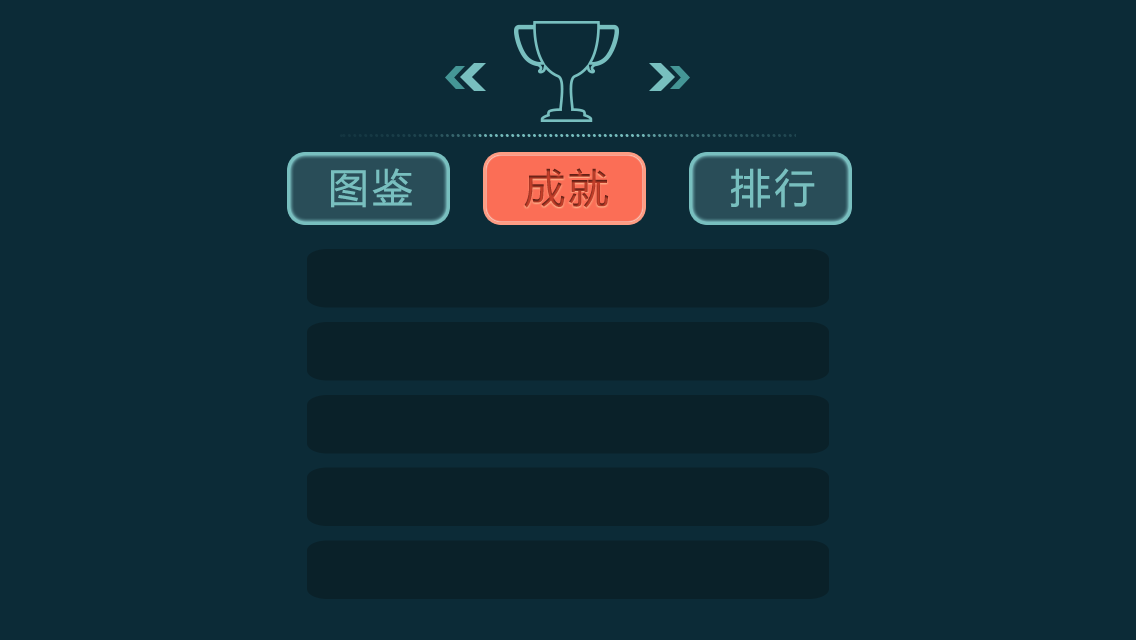
<style>
.page{position:relative;width:1136px;height:640px;background:#0c2b37}
.page>*{position:absolute;margin:0}
.t1{font:40px "MicrosoftYaHei";letter-spacing:0.1em;color:#78bfbf}
.t2{font:40px "MicrosoftYaHei";letter-spacing:0.1em}
</style>
<div class="page">
<p class="t1" style="left:331px;top:168px;width:81px;height:40px">图鉴</p>
<p class="t2" style="left:524px;top:168px;width:85px;height:40px">成就</p>
<p class="t1" style="left:730px;top:168px;width:85px;height:40px">排行</p>
</div>
